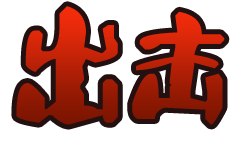
<style>
.page{position:relative;width:241px;height:142px;background:#ffffff}
.page>*{position:absolute;margin:0}
.t1{font:120px "Ò¶¸ùÓÑÌØÉ«¼òÌåÉý¼¶°æ"}
</style>
<div class="page">
<p class="t1" style="left:16px;top:6px;width:209px;height:119px">出击</p>
</div>
